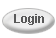
<style>
.page{position:relative;width:56px;height:38px;background:#ffffff}
.page>*{position:absolute;margin:0}
.t1{font:12px "Arial-BoldMT";color:#585858}
</style>
<div class="page">
<p class="t1" style="left:14px;top:14px;width:30px;height:11px">Login</p>
</div>
